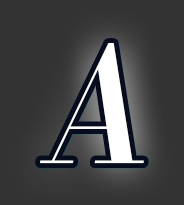
<style>
.page{position:relative;width:184px;height:205px;background:#333333}
.page>*{position:absolute;margin:0}
.t1{font:160px "KochoStd-Heavy";letter-spacing:-0.08em;color:#ffffff;font-style:italic;scale:0.9 1}
</style>
<div class="page">
<p class="t1" style="left:40px;top:43px;width:104px;height:121px">A</p>
</div>
